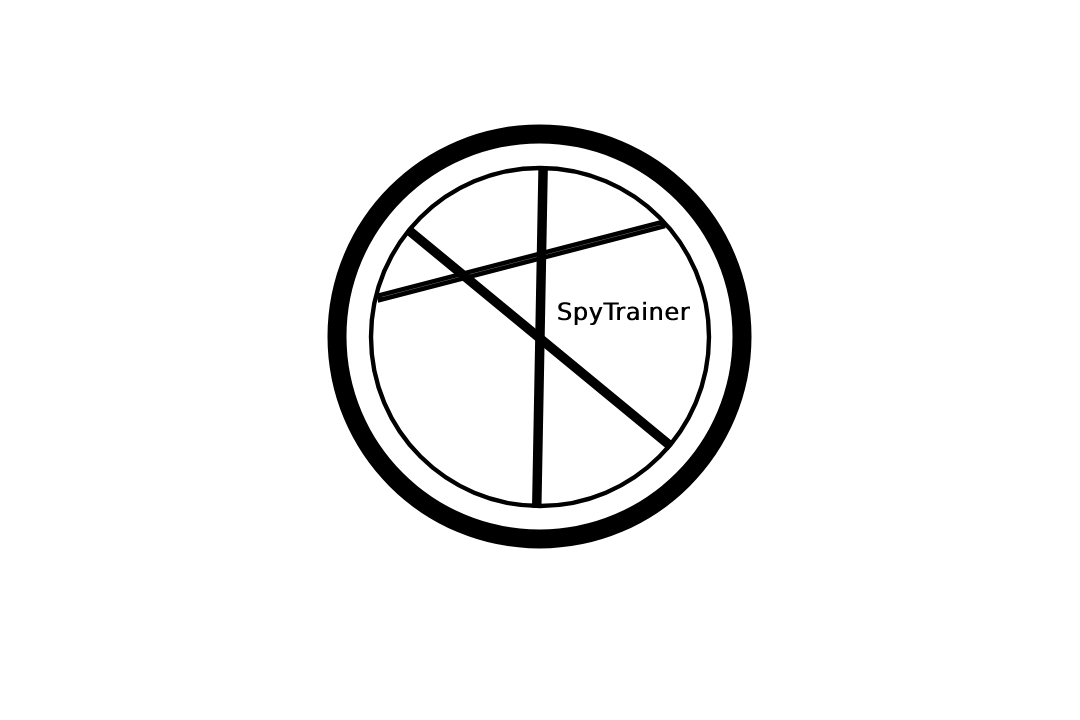
<style>
.page{position:relative;width:1080px;height:720px;background:#ffffff}
.page>*{position:absolute;margin:0}
.t1{font:24px "DejaVuSans";color:#000000;font-weight:bold}
</style>
<div class="page">
<p class="t1" style="left:558px;top:301px;width:133px;height:24px">SpyTrainer</p>
</div>
